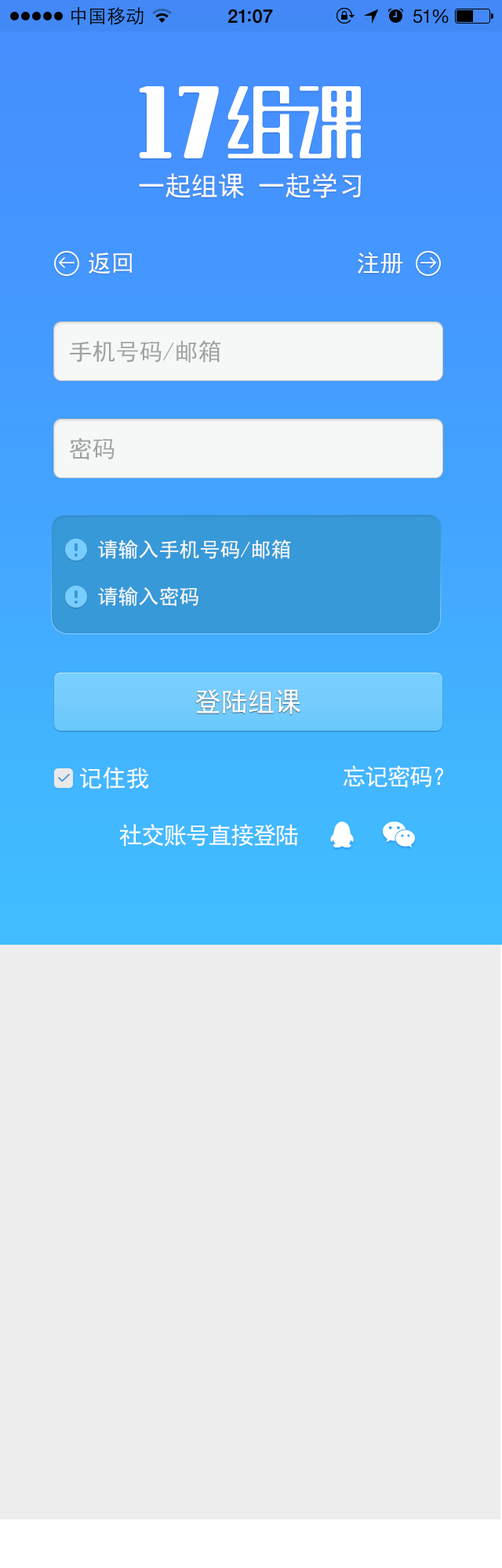
<style>
.page{position:relative;width:502px;height:1568px;background:#ededed}
.page>*{position:absolute;margin:0}
.t1{font:26.7px "SimHei";color:#fbfbfb}
.t2{font:23.5px "SimHei";color:#fefefe}
.t3{font:23.5px "SimHei";color:#a1a1a1}
.t4{font:20.4px "SimHei";color:#f6f8f8}
.t5{font:26.7px "SimHei";color:#fefefe}
.t6{font:23.5px "SimHei";letter-spacing:-0.05em;color:#fefefe}
</style>
<div class="page">
<p class="t1" style="left:139px;top:172px;width:222px;height:26px">一起组课 一起学习</p>
<p class="t2" style="left:89px;top:252px;width:43px;height:22px">返回</p>
<p class="t2" style="left:358px;top:252px;width:45px;height:22px">注册</p>
<p class="t3" style="left:70px;top:340px;width:150px;height:23px">手机号码/邮箱</p>
<p class="t3" style="left:69px;top:437px;width:45px;height:23px">密码</p>
<p class="t4" style="left:98px;top:539px;width:193px;height:20px">请输入手机号码/邮箱</p>
<p class="t4" style="left:98px;top:586px;width:100px;height:20px">请输入密码</p>
<p class="t5" style="left:195px;top:689px;width:105px;height:25px">登陆组课</p>
<p class="t2" style="left:80px;top:767px;width:69px;height:22px">记住我</p>
<p class="t6" style="left:343px;top:765px;width:100px;height:23px">忘记密码？</p>
<p class="t6" style="left:119px;top:824px;width:179px;height:23px">社交账号直接登陆</p>
</div>
